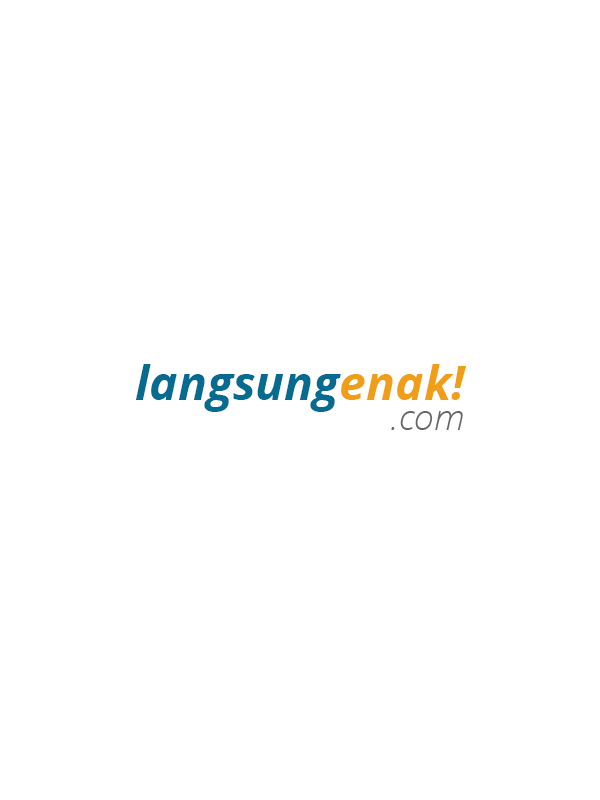
<style>
.page{position:relative;width:600px;height:800px;background:#ffffff}
.page>*{position:absolute;margin:0}
.t1{font:48px "OpenSans-BoldItalic";color:#056b90}
.t2{font:48px "OpenSans-BoldItalic";color:#f09e18}
.t3{font:36px "OpenSansLight-Italic";color:#676767}
</style>
<div class="page">
<p class="t1" style="left:135px;top:364px;width:332px;height:48px">langsung<span class="t2">enak!</span></p>
<p class="t3" style="left:391px;top:411px;width:72px;height:19px">.com</p>
</div>
